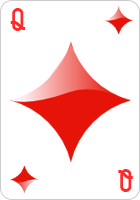
<style>
.page{position:relative;width:140px;height:200px;background:#ffffff}
.page>*{position:absolute;margin:0}
.t1{font:26px "CardCharacters";color:#ff2b2b}
</style>
<div class="page">
<p class="t1" style="left:10px;top:8px;width:16px;height:23px">q</p>
<p class="t1" style="left:118px;top:169px;width:15px;height:23px;rotate:180deg">q</p>
</div>
